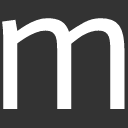
<style>
.page{position:relative;width:128px;height:128px;background:#333333}
.page>*{position:absolute;margin:0}
.t1{font:177px "Actor-Regular";color:#ffffff}
</style>
<div class="page">
<p class="t1" style="left:2px;top:18px;width:123px;height:91px">m</p>
</div>
